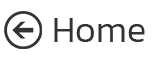
<style>
.page{position:relative;width:160px;height:60px;background:#ffffff}
.page>*{position:absolute;margin:0}
.t1{font:36px "Kanit-Light";color:#333333}
</style>
<div class="page">
<p class="t1" style="left:54px;top:18px;width:91px;height:24px">Home</p>
</div>
